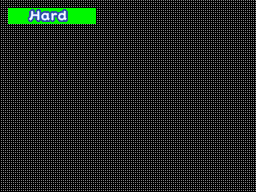
<style>
.page{position:relative;width:256px;height:192px;background:#000000}
.page>*{position:absolute;margin:0}
.t1{font:16.5px "DFLeiShoStd-W5";letter-spacing:0.075em;color:#ffffff}
</style>
<div class="page">
<p class="t1" style="left:29px;top:11px;width:38px;height:9px">Hard</p>
</div>
